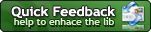
<style>
.page{position:relative;width:151px;height:32px}
.page>*{position:absolute;margin:0}
.t1{font:13px "TrebuchetMS-Bold";letter-spacing:-0.005em;color:#fefeff;scale:1.11 1}
.t2{font:9px "TrebuchetMS-Bold";letter-spacing:-0.005em;color:#c9f3cc;scale:1.11 1}
</style>
<div class="page">
<p class="t1" style="left:11px;top:6px;width:105px;height:12px">Quick Feedback</p>
<p class="t2" style="left:14px;top:17px;width:100px;height:10px">help to enhace the lib</p>
</div>
